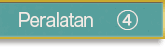
<style>
.page{position:relative;width:165px;height:47px;background:#569f9c}
.page>*{position:absolute;margin:0}
.t1{font:18px "GothicMB101Pro-Regular";letter-spacing:-0.04em;color:#f2ebe5;scale:0.9 1}
</style>
<div class="page">
<p class="t1" style="left:19px;top:12px;width:74px;height:15px">Peralatan</p>
</div>
